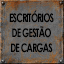
<style>
.page{position:relative;width:64px;height:64px}
.page>*{position:absolute;margin:0}
.t1{font:12px/15.1px "CenturyGothic-Bold";letter-spacing:-0.08em;color:#000000;text-transform:uppercase;scale:0.7 1}
</style>
<div class="page">
<p class="t1" style="left:9px;top:10px;width:45px;height:43px;text-align:center">Escritórios<br>DE GESTÃO<br>de CARGAS</p>
</div>
